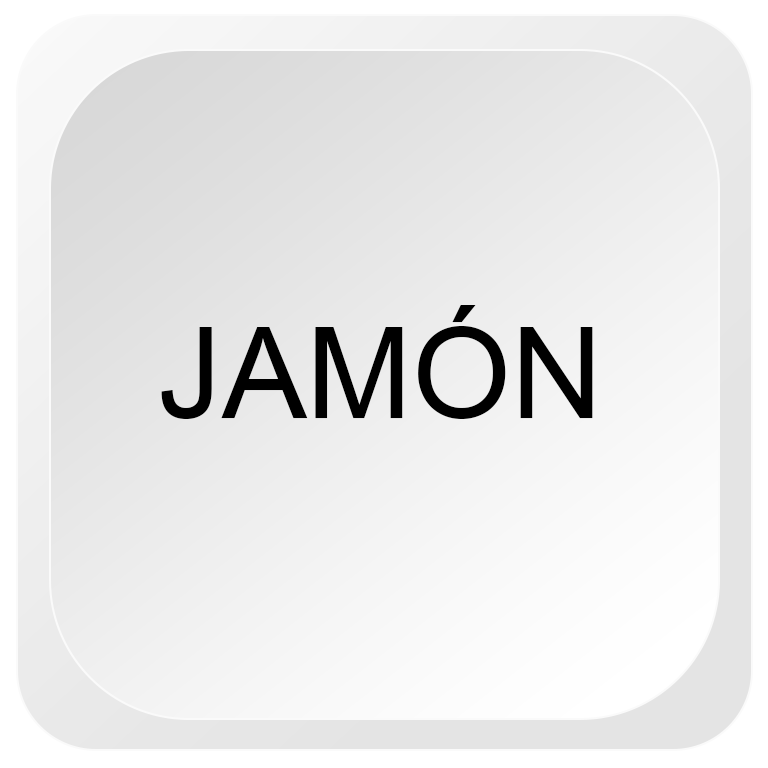
<style>
.page{position:relative;width:768px;height:768px}
.page>*{position:absolute;margin:0}
.t1{font:127px "ArialMT";color:#000000}
</style>
<div class="page">
<p class="t1" style="left:161px;top:305px;width:432px;height:114px">JAMÓN</p>
</div>
